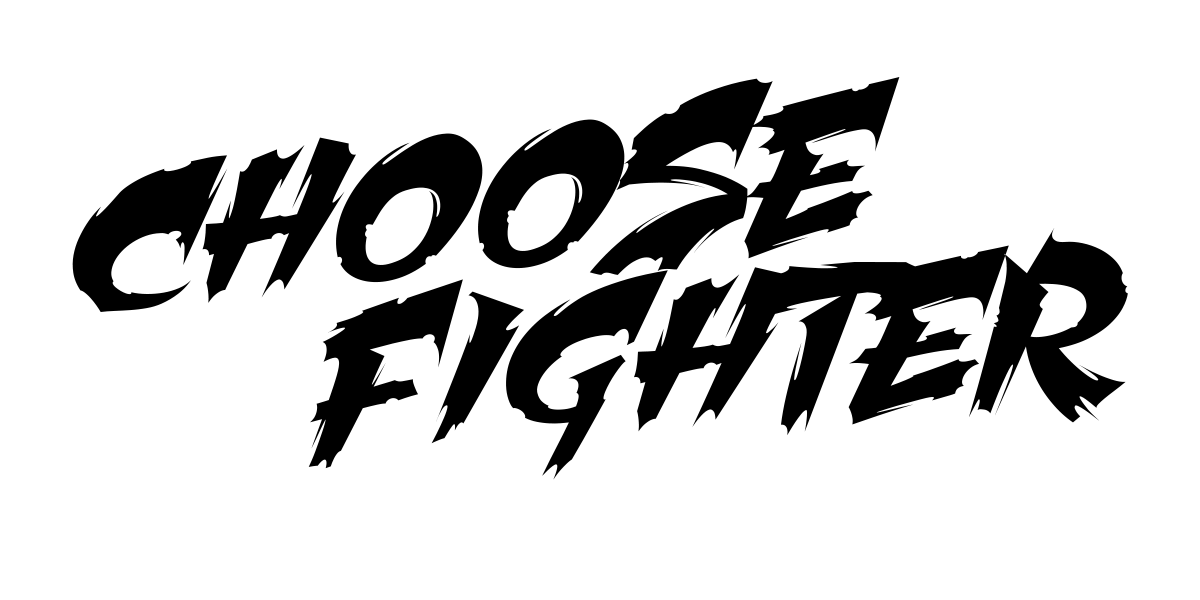
<style>
.page{position:relative;width:1200px;height:600px;background:#ffffff}
.page>*{position:absolute;margin:0}
.t1{font:168.2px "MartyricPersonalUseOnly";color:#000000}
.t2{font:169.5px "MartyricPersonalUseOnly";color:#000000}
</style>
<div class="page">
<p class="t1" style="left:72px;top:77px;width:828px;height:235px;rotate:-6deg">CHOOSE</p>
<p class="t2" style="left:308px;top:228px;width:820px;height:252px;rotate:-4deg">FIGHTER</p>
</div>
